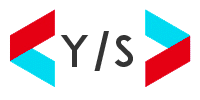
<style>
.page{position:relative;width:200px;height:100px;background:#ffffff}
.page>*{position:absolute;margin:0}
.t1{font:43px "ADAM.CGPRO";letter-spacing:0.025em;color:#343434;text-transform:uppercase}
</style>
<div class="page">
<p class="t1" style="left:60px;top:31px;width:73px;height:40px">y/s</p>
</div>
